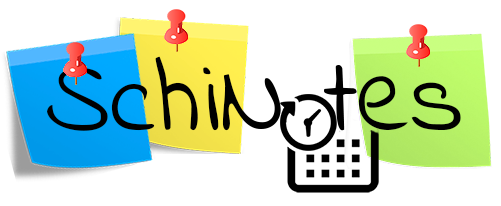
<style>
.page{position:relative;width:501px;height:206px;background:#ffffff}
.page>*{position:absolute;margin:0}
.t1{font:104.2px "IndieFlower";color:#000000}
</style>
<div class="page">
<p class="t1" style="left:47px;top:56px;width:414px;height:75px">SchiN tes</p>
</div>
